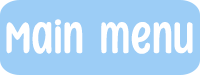
<style>
.page{position:relative;width:200px;height:75px;background:#9ccdf6}
.page>*{position:absolute;margin:0}
.t1{font:50px "SunnySpellsBasic-Regular";letter-spacing:0.035em;color:#ffffff}
</style>
<div class="page">
<p class="t1" style="left:6px;top:19px;width:187px;height:35px">Main menu</p>
</div>
